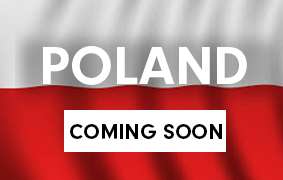
<style>
.page{position:relative;width:283px;height:180px}
.page>*{position:absolute;margin:0}
.t1{font:56px "NeuzeitGro-Bol";color:#ffffff;text-transform:uppercase}
.t2{font:22px "NeuzeitGro-Bol";color:#000000}
</style>
<div class="page">
<p class="t1" style="left:43px;top:46px;width:204px;height:39px">POLAND</p>
<p class="t2" style="left:70px;top:124px;width:152px;height:16px">COMING SOON</p>
</div>
